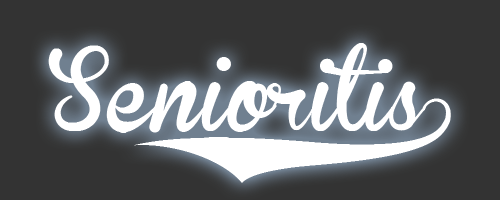
<style>
.page{position:relative;width:500px;height:200px;background:#333333}
.page>*{position:absolute;margin:0}
.t1{font:80.6px/69.8px "BrannbollFet";color:#ffffff}
</style>
<div class="page">
<p class="t1" style="left:48px;top:43px;width:403px;height:140px;text-align:center">Senioritis6</p>
</div>
